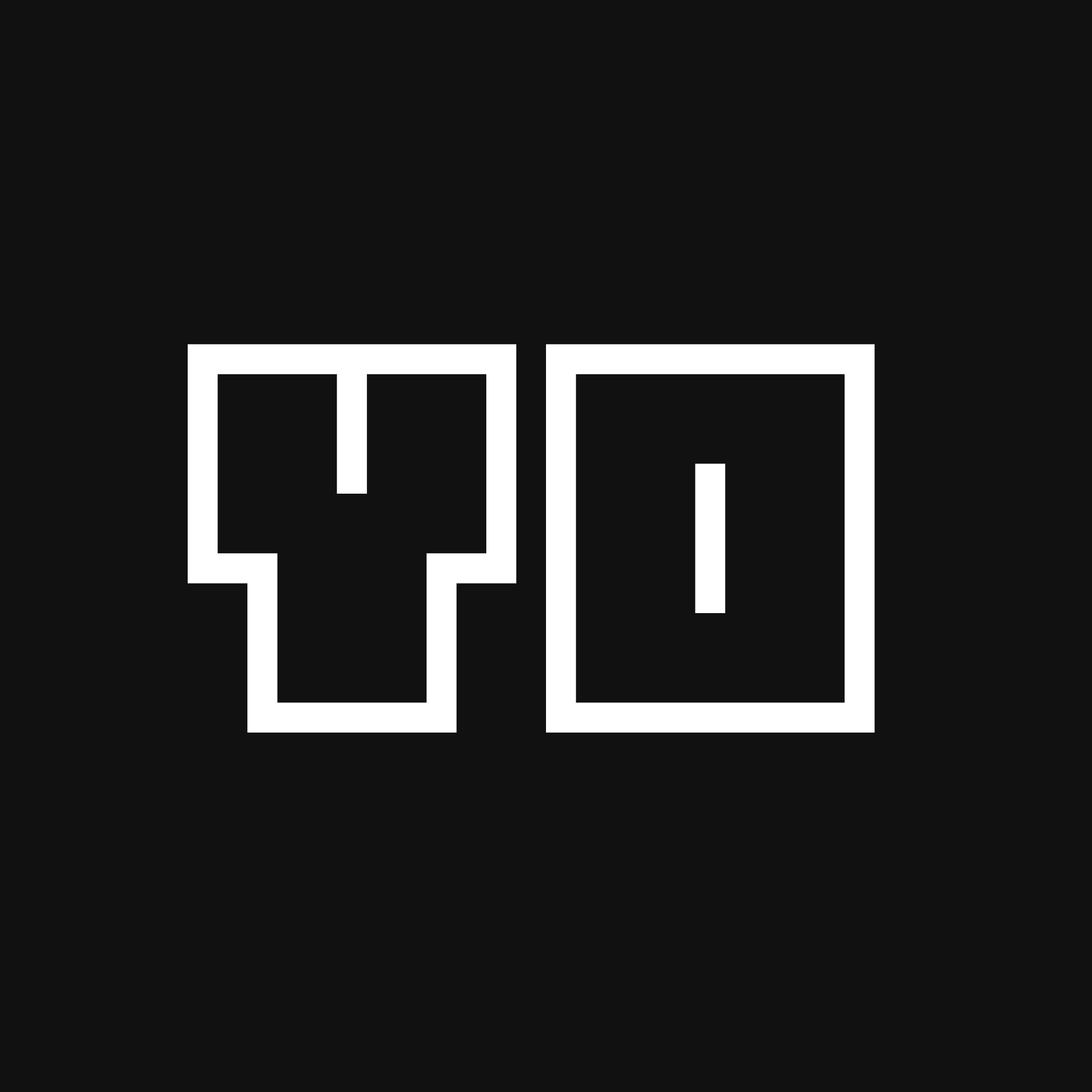
<style>
.page{position:relative;width:1092px;height:1092px;background:#111111}
.page>*{position:absolute;margin:0}
.t1{font:477.8px "Blocked";color:#ffffff}
</style>
<div class="page">
<p class="t1" style="left:188px;top:344px;width:687px;height:389px">YO</p>
</div>
